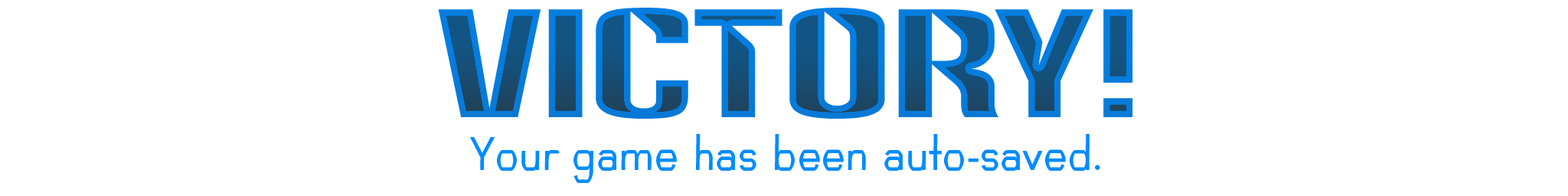
<style>
.page{position:relative;width:1568px;height:196px;background:#ffffff}
.page>*{position:absolute;margin:0}
.t1{font:147px "Anklepants-Regular"}
.t2{font:38.3px "Bespoke-wQeoCM0HwU";color:#008cff}
</style>
<div class="page">
<p class="t1" style="left:438px;top:8px;width:695px;height:111px">Victory!</p>
<p class="t2" style="left:469px;top:134px;width:631px;height:49px">Your game has been auto-saved.</p>
</div>
